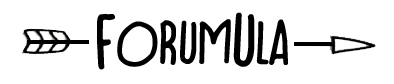
<style>
.page{position:relative;width:394px;height:84px;background:#ffffff}
.page>*{position:absolute;margin:0}
.t1{font:24.5px "Moonlight";color:#000000;scale:1.03 1}
.t2{font:30.7px "Moonlight";color:#000000;scale:1.03 1}
</style>
<div class="page">
<p class="t1" style="left:97px;top:12px;width:191px;height:58px;text-align:center"><span class="t2">F</span>orum<span class="t2">u</span>la</p>
</div>
